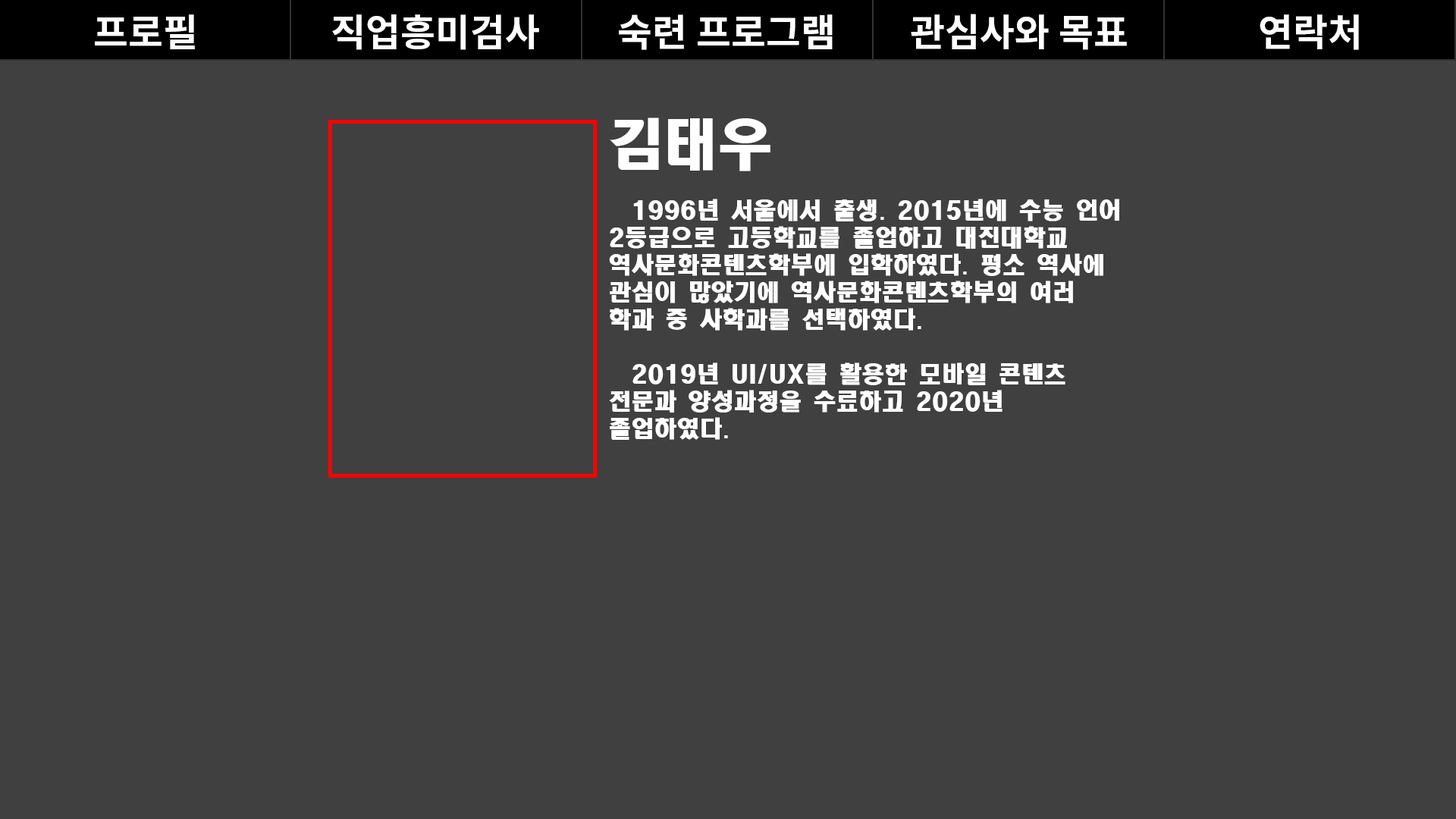
<style>
.page{position:relative;width:1456px;height:819px;background:#404040}
.page>*{position:absolute;margin:0}
.t1{font:37.9px "NotoSansKR-Bold";color:#ffffff}
.t2{font:22.7px "HeadlineR-HM";color:#ffffff}
.t3{font:54.6px "HeadlineR-HM";color:#ffffff}
</style>
<div class="page">
<p class="t1" style="left:95px;top:14px;width:100px;height:35px">프로필</p>
<p class="t1" style="left:332px;top:14px;width:207px;height:36px">직업흥미검사</p>
<p class="t1" style="left:619px;top:14px;width:214px;height:36px">숙련 프로그램</p>
<p class="t1" style="left:911px;top:14px;width:216px;height:36px">관심사와 목표</p>
<p class="t1" style="left:1260px;top:14px;width:99px;height:36px">연락처</p>
<p class="t2" style="left:609px;top:118px;width:510px;height:322px"><span class="t3">김태우<br></span><br>  1996년 서울에서 출생. 2015년에 수능 언어 2등급으로 고등학교를 졸업하고 대진대학교 역사문화콘텐츠학부에 입학하였다. 평소 역사에 관심이 많았기에 역사문화콘텐츠학부의 여러 학과 중 사학과를 선택하였다.<br><br>  2019년 UI/UX를 활용한 모바일 콘텐츠 전문과 양성과정을 수료하고 2020년 졸업하였다.</p>
</div>
